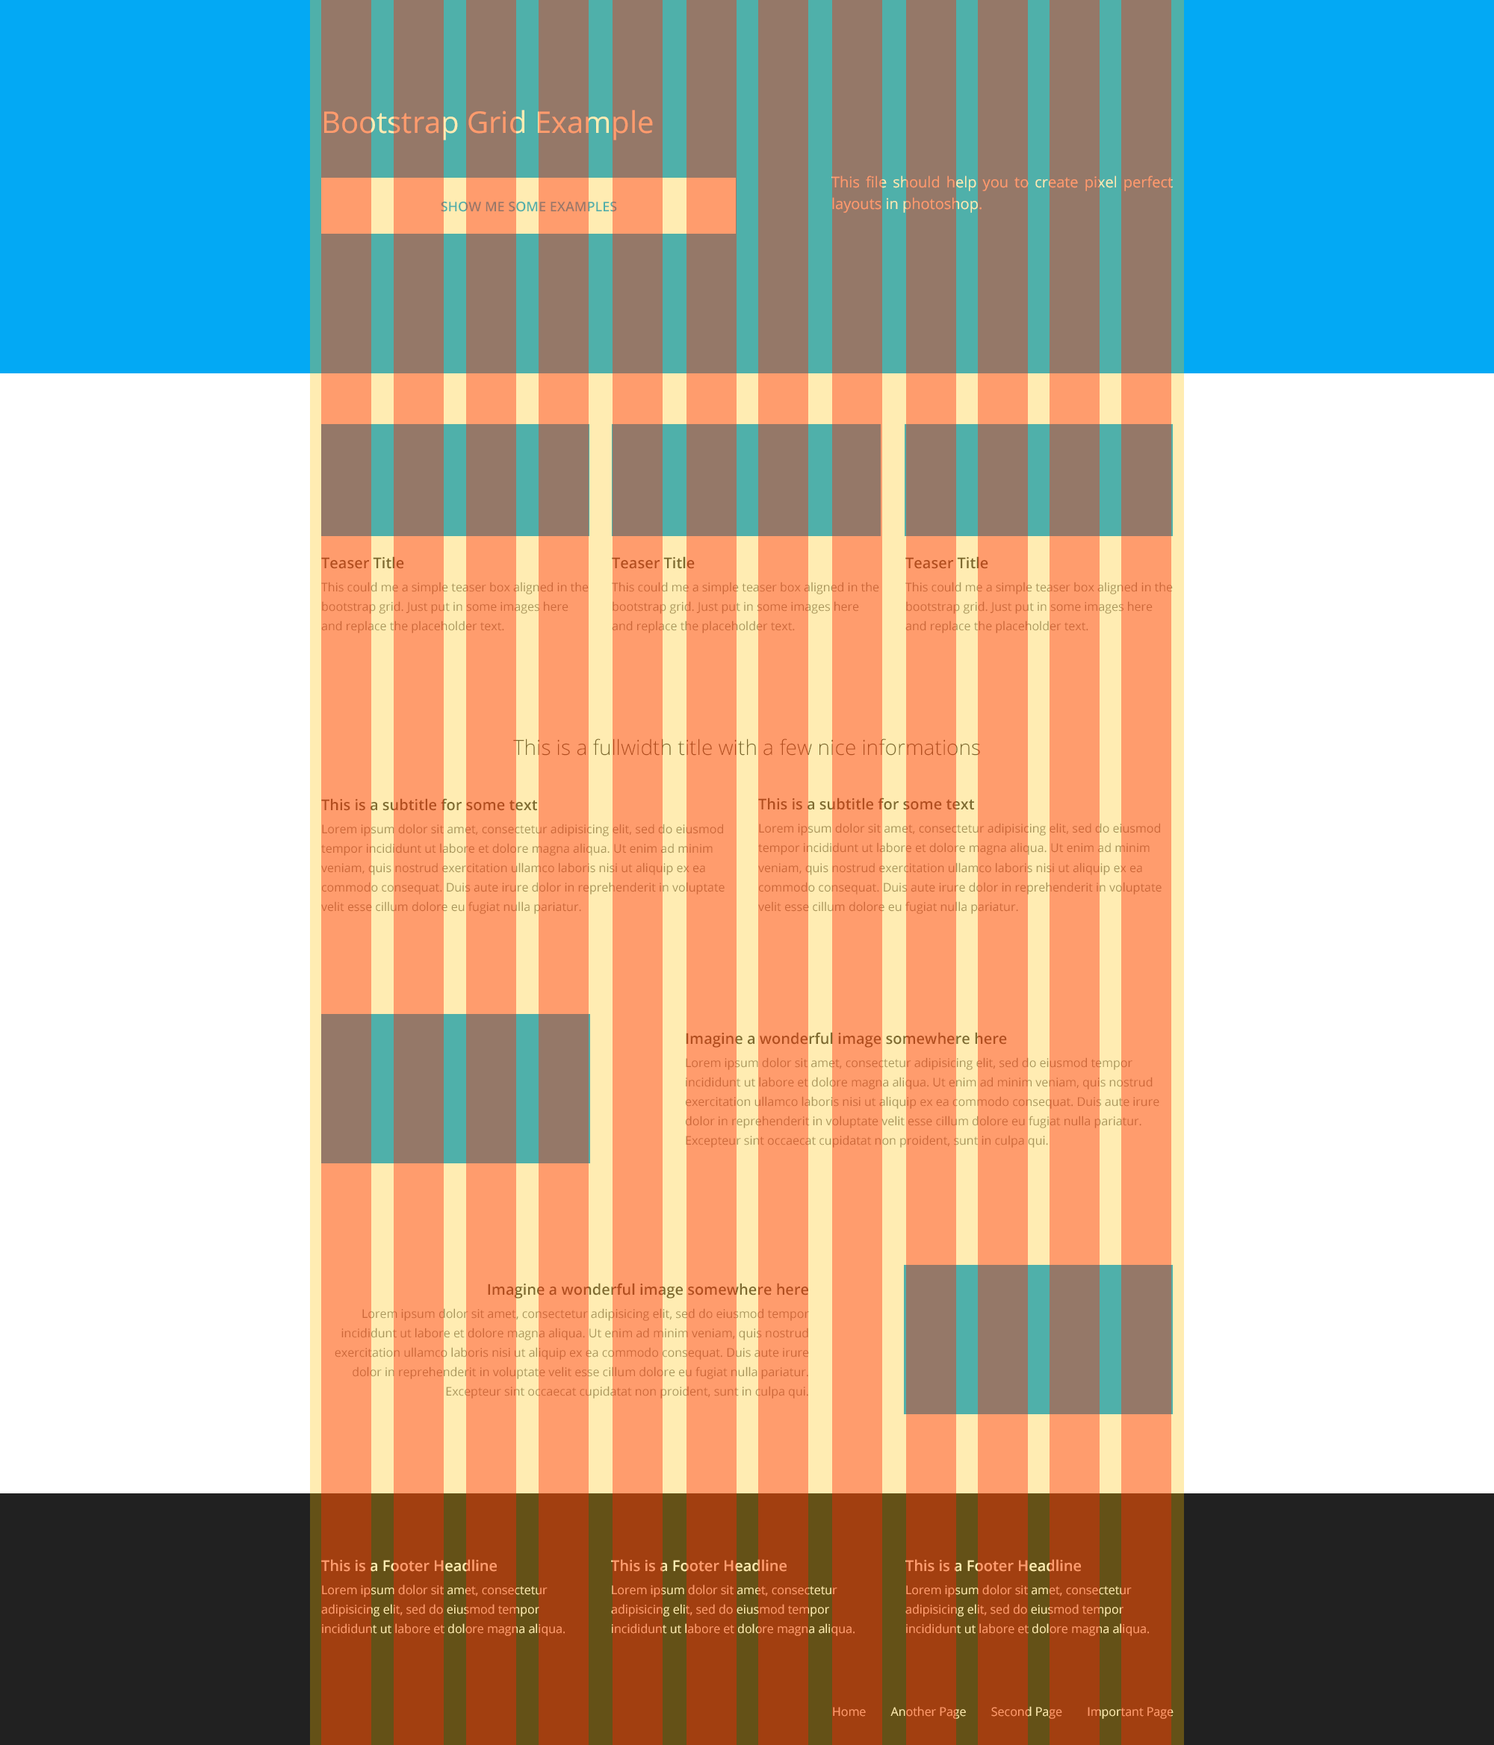
<style>
.page{position:relative;width:1494px;height:1745px;background:#ffffff}
.page>*{position:absolute;margin:0}
.t1{font:29.9px "OpenSans";color:#ff9c6d}
.t2{font:14.9px/21.7px "OpenSans";color:#ff9c6d}
.t3{font:13.4px "OpenSans-Semibold"}
.t4{font:12px/19.4px "OpenSans"}
.t5{font:9px "MyriadPro-Regular"}
.t6{font:9px "MyriadPro-Regular";color:#fe9b6d}
.t7{font:12px "OpenSans";color:#fe9b6d}
</style>
<div class="page">
<p class="t1" style="left:324px;top:110px;width:329px;height:30px">Bootstrap Grid Example</p>
<p class="t2" style="left:831px;top:176px;width:342px;height:37px;text-align:justify">This file should help you to create pixel perfect layouts in photoshop.</p>
<p class="t3" style="left:441px;top:202px;width:176px;height:10px">SHOW ME SOME EXAMPLES</p>
<p class="t4" style="left:321px;top:556px;width:268px;height:77px"><span class="t5">Teaser Title<br></span>This could me a simple teaser box aligned in the bootstrap grid. Just put in some images here and replace the placeholder text.</p>
<p class="t4" style="left:612px;top:556px;width:267px;height:77px"><span class="t5">Teaser Title<br></span>This could me a simple teaser box aligned in the bootstrap grid. Just put in some images here and replace the placeholder text.</p>
<p class="t4" style="left:905px;top:556px;width:268px;height:77px"><span class="t5">Teaser Title<br></span>This could me a simple teaser box aligned in the bootstrap grid. Just put in some images here and replace the placeholder text.</p>
<p class="t5" style="left:513px;top:739px;width:467px;height:17px;text-align:center">This is a fullwidth title with a few nice informations</p>
<p class="t5" style="left:758px;top:798px;width:403px;height:116px">This is a subtitle for some text<br>Lorem ipsum dolor sit amet, consectetur adipisicing elit, sed do eiusmod tempor incididunt ut labore et dolore magna aliqua. Ut enim ad minim veniam, quis nostrud exercitation ullamco laboris nisi ut aliquip ex ea commodo consequat. Duis aute irure dolor in reprehenderit in voluptate velit esse cillum dolore eu fugiat nulla pariatur.</p>
<p class="t5" style="left:321px;top:798px;width:403px;height:116px">This is a subtitle for some text<br>Lorem ipsum dolor sit amet, consectetur adipisicing elit, sed do eiusmod tempor incididunt ut labore et dolore magna aliqua. Ut enim ad minim veniam, quis nostrud exercitation ullamco laboris nisi ut aliquip ex ea commodo consequat. Duis aute irure dolor in reprehenderit in voluptate velit esse cillum dolore eu fugiat nulla pariatur.</p>
<p class="t5" style="left:686px;top:1032px;width:473px;height:116px">Imagine a wonderful image somewhere here<br>Lorem ipsum dolor sit amet, consectetur adipisicing elit, sed do eiusmod tempor incididunt ut labore et dolore magna aliqua. Ut enim ad minim veniam, quis nostrud exercitation ullamco laboris nisi ut aliquip ex ea commodo consequat. Duis aute irure dolor in reprehenderit in voluptate velit esse cillum dolore eu fugiat nulla pariatur. Excepteur sint occaecat cupidatat non proident, sunt in culpa qui.</p>
<p class="t5" style="left:335px;top:1283px;width:474px;height:116px;text-align:right">Imagine a wonderful image somewhere here<br>Lorem ipsum dolor sit amet, consectetur adipisicing elit, sed do eiusmod tempor incididunt ut labore et dolore magna aliqua. Ut enim ad minim veniam, quis nostrud exercitation ullamco laboris nisi ut aliquip ex ea commodo consequat. Duis aute irure dolor in reprehenderit in voluptate velit esse cillum dolore eu fugiat nulla pariatur. Excepteur sint occaecat cupidatat non proident, sunt in culpa qui.</p>
<p class="t6" style="left:321px;top:1560px;width:244px;height:76px">This is a Footer Headline<br>Lorem ipsum dolor sit amet, consectetur adipisicing elit, sed do eiusmod tempor incididunt ut labore et dolore magna aliqua.</p>
<p class="t6" style="left:611px;top:1560px;width:243px;height:76px">This is a Footer Headline<br>Lorem ipsum dolor sit amet, consectetur adipisicing elit, sed do eiusmod tempor incididunt ut labore et dolore magna aliqua.</p>
<p class="t6" style="left:905px;top:1560px;width:244px;height:76px">This is a Footer Headline<br>Lorem ipsum dolor sit amet, consectetur adipisicing elit, sed do eiusmod tempor incididunt ut labore et dolore magna aliqua.</p>
<p class="t7" style="left:833px;top:1707px;width:340px;height:12px">Home        Another Page        Second Page        Important Page</p>
</div>
